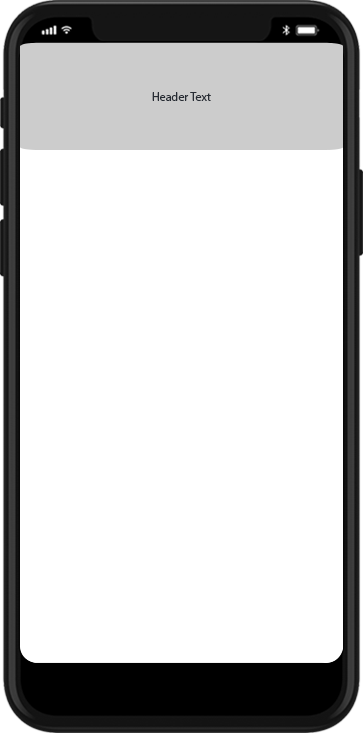
<style>
.page{position:relative;width:363px;height:733px;background:#ffffff}
.page>*{position:absolute;margin:0}
.t1{font:12px "MyriadPro-Regular";color:#272c34}
</style>
<div class="page">
<p class="t1" style="left:152px;top:92px;width:59px;height:9px">Header Text</p>
</div>
